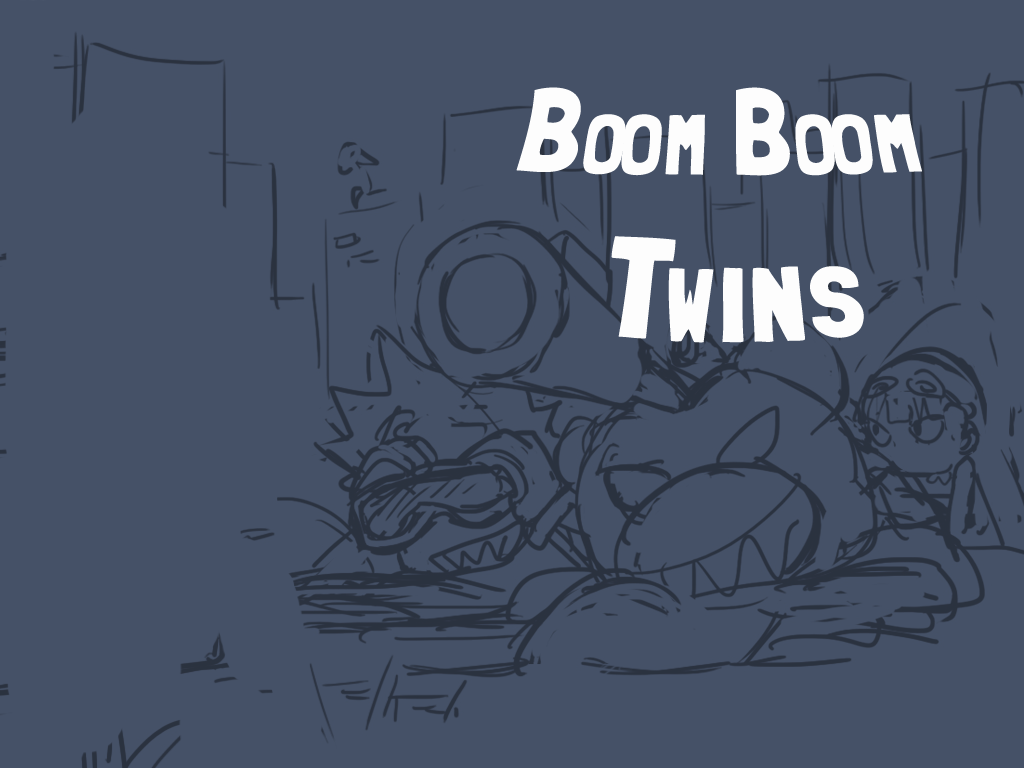
<style>
.page{position:relative;width:1024px;height:768px;background:#455167}
.page>*{position:absolute;margin:0}
.t1{font:120px "Folk-solid";color:#fdfdfd}
</style>
<div class="page">
<p class="t1" style="left:516px;top:87px;width:406px;height:256px;text-align:center">Boom Boom <br>Twins</p>
</div>
